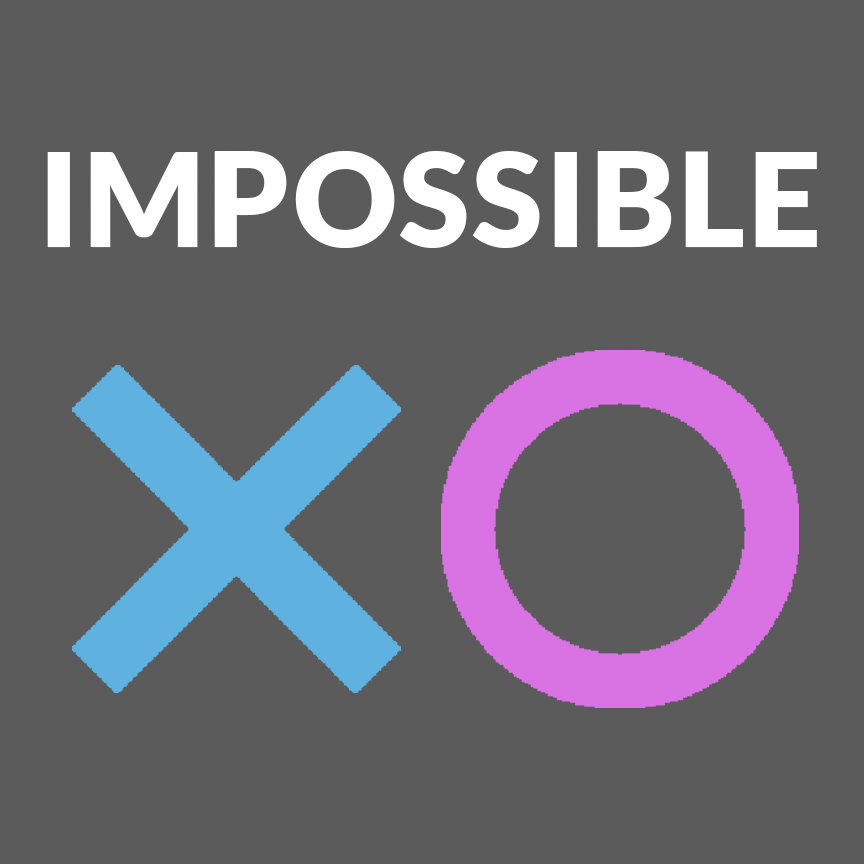
<style>
.page{position:relative;width:864px;height:864px;background:#5b5b5b}
.page>*{position:absolute;margin:0}
.t1{font:130px "Lato-Black";letter-spacing:0.02em;color:#ffffff}
</style>
<div class="page">
<p class="t1" style="left:47px;top:151px;width:770px;height:97px">IMPOSSIBLE</p>
</div>
